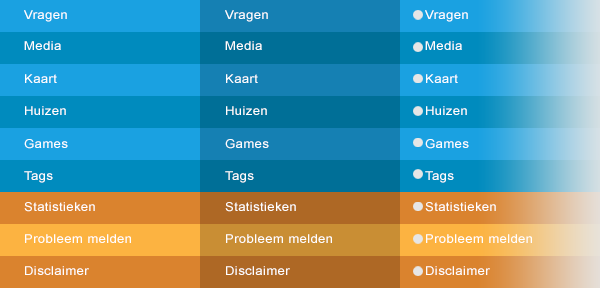
<style>
.page{position:relative;width:600px;height:288px}
.page>*{position:absolute;margin:0}
.t1{font:12px "ArialMT";letter-spacing:0.025em;color:#ffffff;scale:1.1 1}
</style>
<div class="page">
<p class="t1" style="left:24px;top:10px;width:43px;height:12px">Vragen</p>
<p class="t1" style="left:225px;top:10px;width:43px;height:12px">Vragen</p>
<p class="t1" style="left:425px;top:10px;width:43px;height:12px">Vragen</p>
<p class="t1" style="left:24px;top:41px;width:37px;height:9px">Media</p>
<p class="t1" style="left:225px;top:41px;width:37px;height:9px">Media</p>
<p class="t1" style="left:425px;top:41px;width:37px;height:9px">Media</p>
<p class="t1" style="left:25px;top:74px;width:32px;height:9px">Kaart</p>
<p class="t1" style="left:226px;top:74px;width:32px;height:9px">Kaart</p>
<p class="t1" style="left:426px;top:74px;width:32px;height:9px">Kaart</p>
<p class="t1" style="left:25px;top:106px;width:41px;height:9px">Huizen</p>
<p class="t1" style="left:226px;top:106px;width:41px;height:9px">Huizen</p>
<p class="t1" style="left:426px;top:106px;width:41px;height:9px">Huizen</p>
<p class="t1" style="left:24px;top:139px;width:44px;height:10px">Games</p>
<p class="t1" style="left:225px;top:139px;width:44px;height:10px">Games</p>
<p class="t1" style="left:425px;top:139px;width:44px;height:10px">Games</p>
<p class="t1" style="left:24px;top:171px;width:29px;height:12px">Tags</p>
<p class="t1" style="left:225px;top:171px;width:29px;height:12px">Tags</p>
<p class="t1" style="left:425px;top:171px;width:29px;height:12px">Tags</p>
<p class="t1" style="left:24px;top:202px;width:71px;height:10px">Statistieken</p>
<p class="t1" style="left:225px;top:202px;width:71px;height:10px">Statistieken</p>
<p class="t1" style="left:425px;top:202px;width:71px;height:10px">Statistieken</p>
<p class="t1" style="left:25px;top:234px;width:106px;height:9px">Probleem melden</p>
<p class="t1" style="left:226px;top:234px;width:106px;height:9px">Probleem melden</p>
<p class="t1" style="left:426px;top:234px;width:106px;height:9px">Probleem melden</p>
<p class="t1" style="left:25px;top:266px;width:64px;height:9px">Disclaimer</p>
<p class="t1" style="left:226px;top:266px;width:64px;height:9px">Disclaimer</p>
<p class="t1" style="left:426px;top:266px;width:64px;height:9px">Disclaimer</p>
</div>
